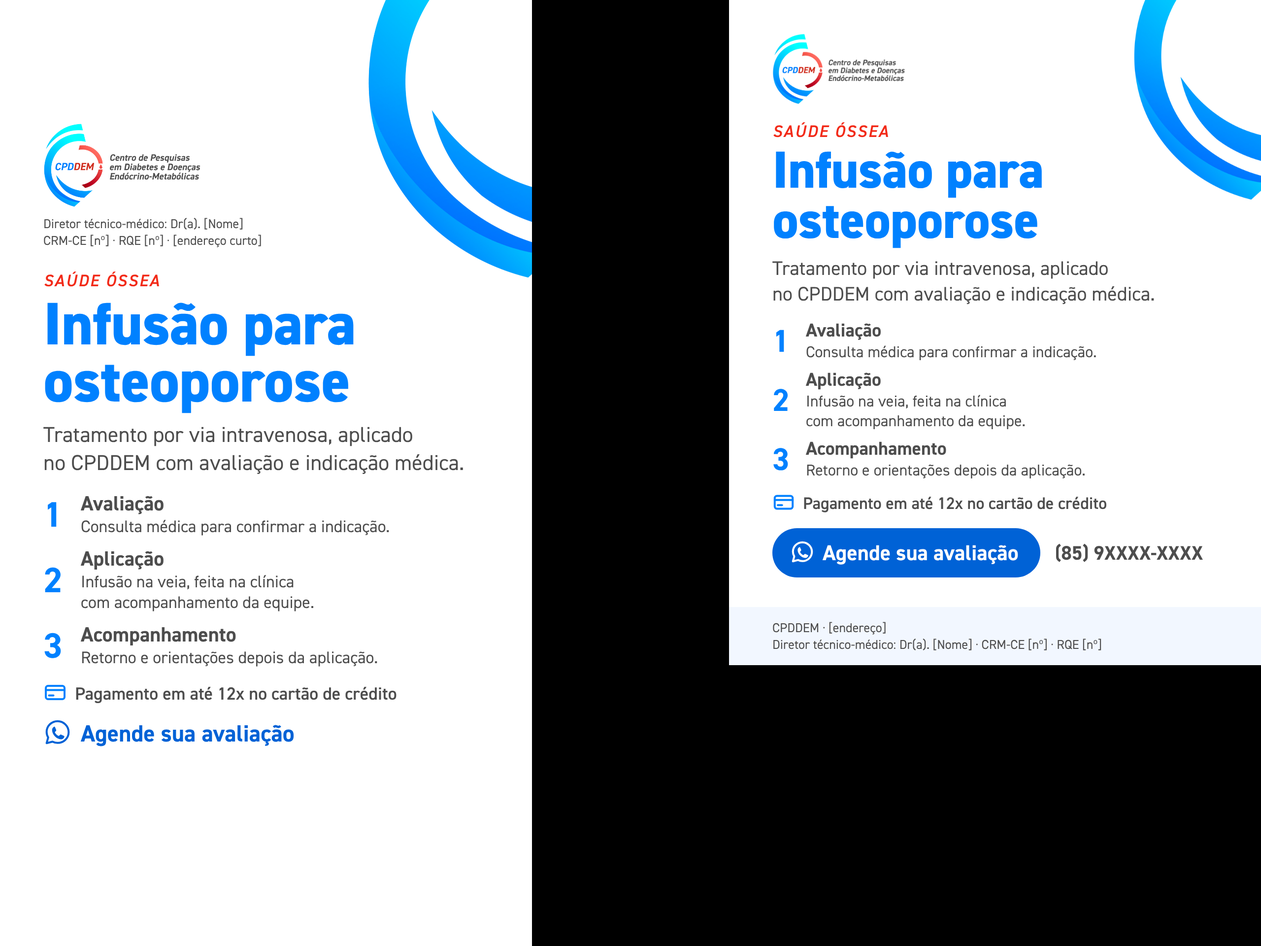
<style>
.page{position:relative;width:1261px;height:946px;background:#ffffff}
.page>*{position:absolute;margin:0}
.t1{font:16.7px "DIN2014-DemiItalic";letter-spacing:0.08em;color:#f22a18}
.t2{font:52.2px/50.2px "DIN2014-ExtraBold";letter-spacing:-0.005em;color:#0081ff}
.t3{font:12.8px/16.7px "DIN2014-Regular";color:#4d4d4d}
.t4{font:19.7px/25.6px "DIN2014-Regular";color:#4d4d4d}
.t5{font:60.1px/57.1px "DIN2014-ExtraBold";letter-spacing:-0.005em;color:#0081ff}
.t6{font:31.5px "DIN2014-Bold";color:#0081ff}
.t7{font:18.7px "DIN2014-Bold";color:#4d4d4d}
.t8{font:15.8px "DIN2014-Regular";color:#4d4d4d}
.t9{font:15.8px/19.7px "DIN2014-Regular";color:#4d4d4d}
.t10{font:21.7px/28.1px "DIN2014-Regular";color:#4d4d4d}
.t11{font:20.7px "DIN2014-Bold";color:#4d4d4d}
.t12{font:16.7px "DIN2014-Demi";color:#4d4d4d}
.t13{font:35.5px "DIN2014-Bold";color:#0081ff}
.t14{font:16.7px "DIN2014-Regular";color:#4d4d4d}
.t15{font:21.7px "DIN2014-Bold";color:#ffffff}
.t16{font:19.7px "DIN2014-Bold";color:#4d4d4d}
.t17{font:16.7px/20.7px "DIN2014-Regular";color:#4d4d4d}
.t18{font:17.7px "DIN2014-Demi";color:#4d4d4d}
.t19{font:23.6px "DIN2014-Bold";color:#0062d6}
</style>
<div class="page">
<p class="t1" style="left:773px;top:122px;width:115px;height:15px">SAÚDE ÓSSEA</p>
<p class="t2" style="left:774px;top:151px;width:268px;height:97px">Infusão para<br>osteoporose</p>
<p class="t3" style="left:44px;top:218px;width:217px;height:29px">Diretor técnico-médico: Dr(a). [Nome]<br>CRM-CE [nº] · RQE [nº] · [endereço curto]</p>
<p class="t4" style="left:772px;top:261px;width:382px;height:43px">Tratamento por via intravenosa, aplicado<br>no CPDDEM com avaliação e indicação médica.</p>
<p class="t1" style="left:44px;top:271px;width:115px;height:16px">SAÚDE ÓSSEA</p>
<p class="t5" style="left:45px;top:302px;width:309px;height:111px">Infusão para<br>osteoporose</p>
<p class="t6" style="left:776px;top:330px;width:8px;height:22px">1</p>
<p class="t7" style="left:805px;top:323px;width:76px;height:17px">Avaliação</p>
<p class="t8" style="left:806px;top:345px;width:290px;height:15px">Consulta médica para confirmar a indicação.</p>
<p class="t7" style="left:805px;top:372px;width:76px;height:18px">Aplicação</p>
<p class="t6" style="left:774px;top:389px;width:14px;height:22px">2</p>
<p class="t9" style="left:806px;top:395px;width:219px;height:34px">Infusão na veia, feita na clínica<br>com acompanhamento da equipe.</p>
<p class="t10" style="left:43px;top:427px;width:420px;height:47px">Tratamento por via intravenosa, aplicado<br>no CPDDEM com avaliação e indicação médica.</p>
<p class="t6" style="left:773px;top:448px;width:15px;height:22px">3</p>
<p class="t7" style="left:805px;top:441px;width:141px;height:18px">Acompanhamento</p>
<p class="t8" style="left:807px;top:464px;width:278px;height:14px">Retorno e orientações depois da aplicação.</p>
<p class="t11" style="left:80px;top:496px;width:84px;height:18px">Avaliação</p>
<p class="t12" style="left:804px;top:496px;width:302px;height:16px">Pagamento em até 12x no cartão de crédito</p>
<p class="t13" style="left:48px;top:502px;width:9px;height:25px">1</p>
<p class="t14" style="left:81px;top:520px;width:308px;height:15px">Consulta médica para confirmar a indicação.</p>
<p class="t15" style="left:822px;top:545px;width:196px;height:19px">Agende sua avaliação</p>
<p class="t16" style="left:1056px;top:543px;width:147px;height:19px">(85) 9XXXX-XXXX</p>
<p class="t11" style="left:80px;top:551px;width:84px;height:18px">Aplicação</p>
<p class="t13" style="left:45px;top:567px;width:16px;height:25px">2</p>
<p class="t17" style="left:81px;top:575px;width:232px;height:36px">Infusão na veia, feita na clínica<br>com acompanhamento da equipe.</p>
<p class="t11" style="left:80px;top:627px;width:156px;height:18px">Acompanhamento</p>
<p class="t3" style="left:773px;top:622px;width:328px;height:28px">CPDDEM · [endereço]<br>Diretor técnico-médico: Dr(a). [Nome] · CRM-CE [nº] · RQE [nº]</p>
<p class="t13" style="left:44px;top:632px;width:17px;height:26px">3</p>
<p class="t14" style="left:82px;top:651px;width:295px;height:15px">Retorno e orientações depois da aplicação.</p>
<p class="t18" style="left:76px;top:687px;width:320px;height:16px">Pagamento em até 12x no cartão de crédito</p>
<p class="t19" style="left:80px;top:725px;width:214px;height:21px">Agende sua avaliação</p>
</div>
